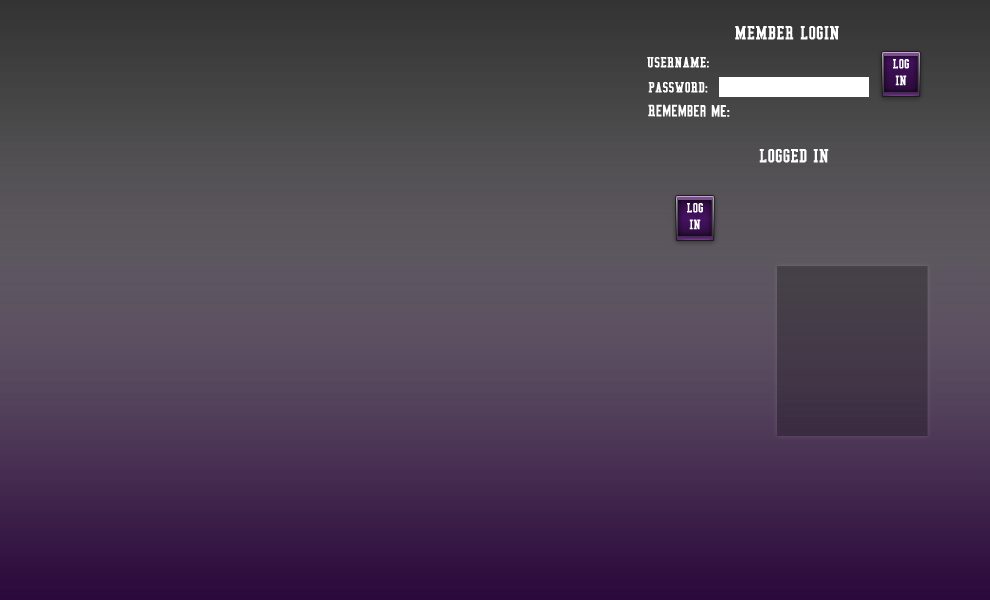
<style>
.page{position:relative;width:990px;height:600px}
.page>*{position:absolute;margin:0}
.t1{font:19.4px "CollegeCondensed";color:#ffffff}
.t2{font:15.3px "CollegeCondensed";color:#ffffff}
.t3{font:13.9px "CollegeCondensed";color:#ffffff}
.t4{font:16.7px "CollegeCondensed";color:#ffffff}
</style>
<div class="page">
<p class="t1" style="left:735px;top:26px;width:104px;height:14px">MEMBER LOGIN</p>
<p class="t2" style="left:647px;top:57px;width:62px;height:11px;text-align:center">USERNAME:<br>;<br>ll</p>
<p class="t3" style="left:893px;top:59px;width:16px;height:27px;text-align:center">LOG<br>IN</p>
<p class="t2" style="left:648px;top:82px;width:60px;height:11px">PASSWORD:</p>
<p class="t4" style="left:648px;top:104px;width:82px;height:13px">Remember me:</p>
<p class="t1" style="left:759px;top:149px;width:70px;height:14px">LOGGED IN</p>
<p class="t3" style="left:687px;top:203px;width:16px;height:27px;text-align:center">LOG<br>IN</p>
</div>
